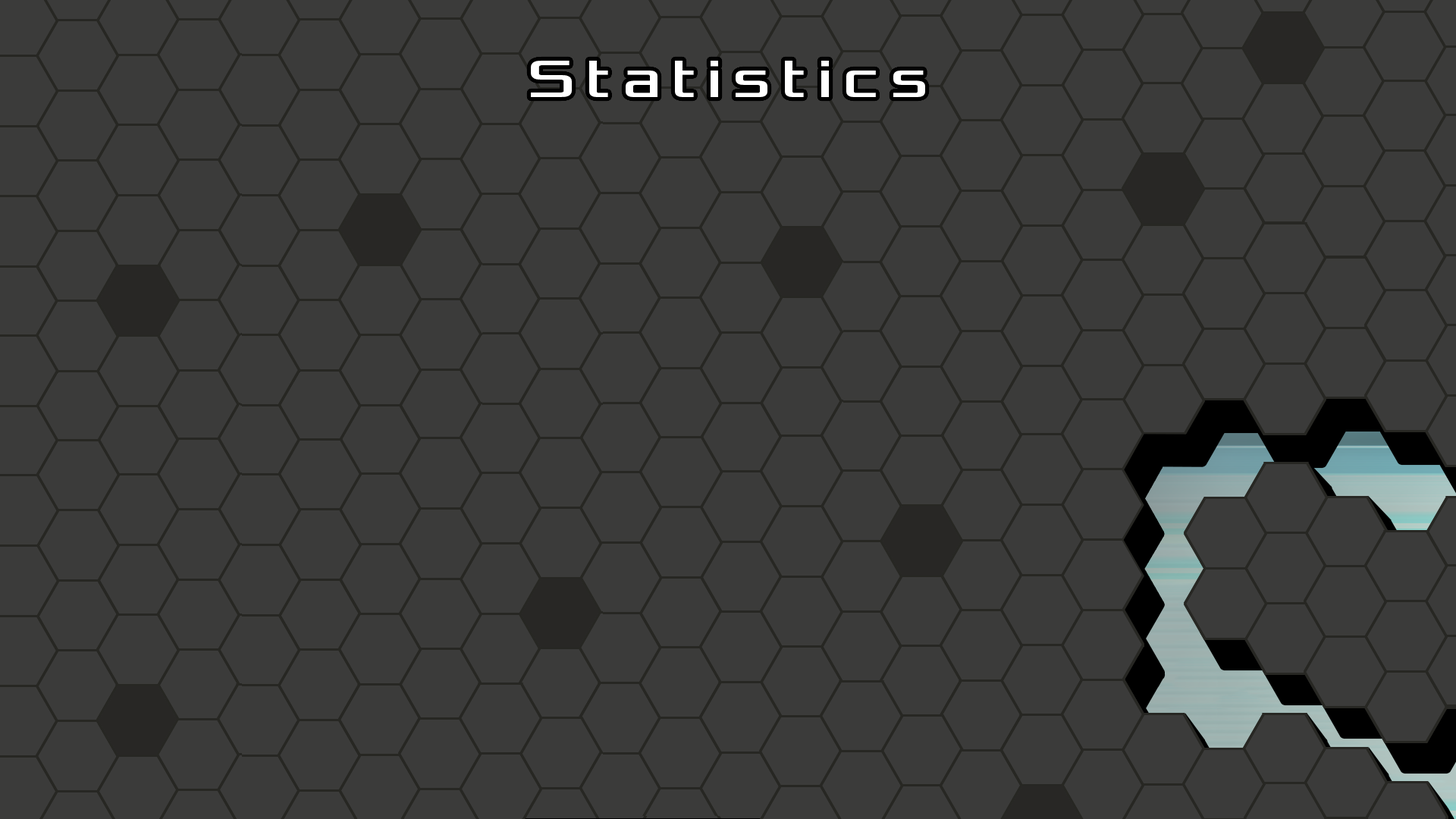
<style>
.page{position:relative;width:1456px;height:819px;background:#3b3b3a}
.page>*{position:absolute;margin:0}
.t1{font:54.6px "Xolonium";letter-spacing:0.2em;color:#ffffff}
</style>
<div class="page">
<p class="t1" style="left:531px;top:61px;width:394px;height:36px">Statistics</p>
</div>
